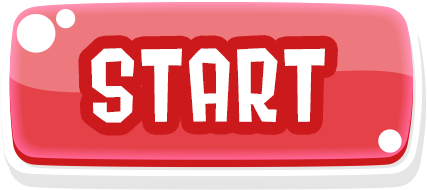
<style>
.page{position:relative;width:427px;height:190px;background:#ffffff}
.page>*{position:absolute;margin:0}
.t1{font:100px "Splat2K";letter-spacing:0.01em;color:#ffffff}
</style>
<div class="page">
<p class="t1" style="left:91px;top:48px;width:234px;height:75px">START</p>
</div>
